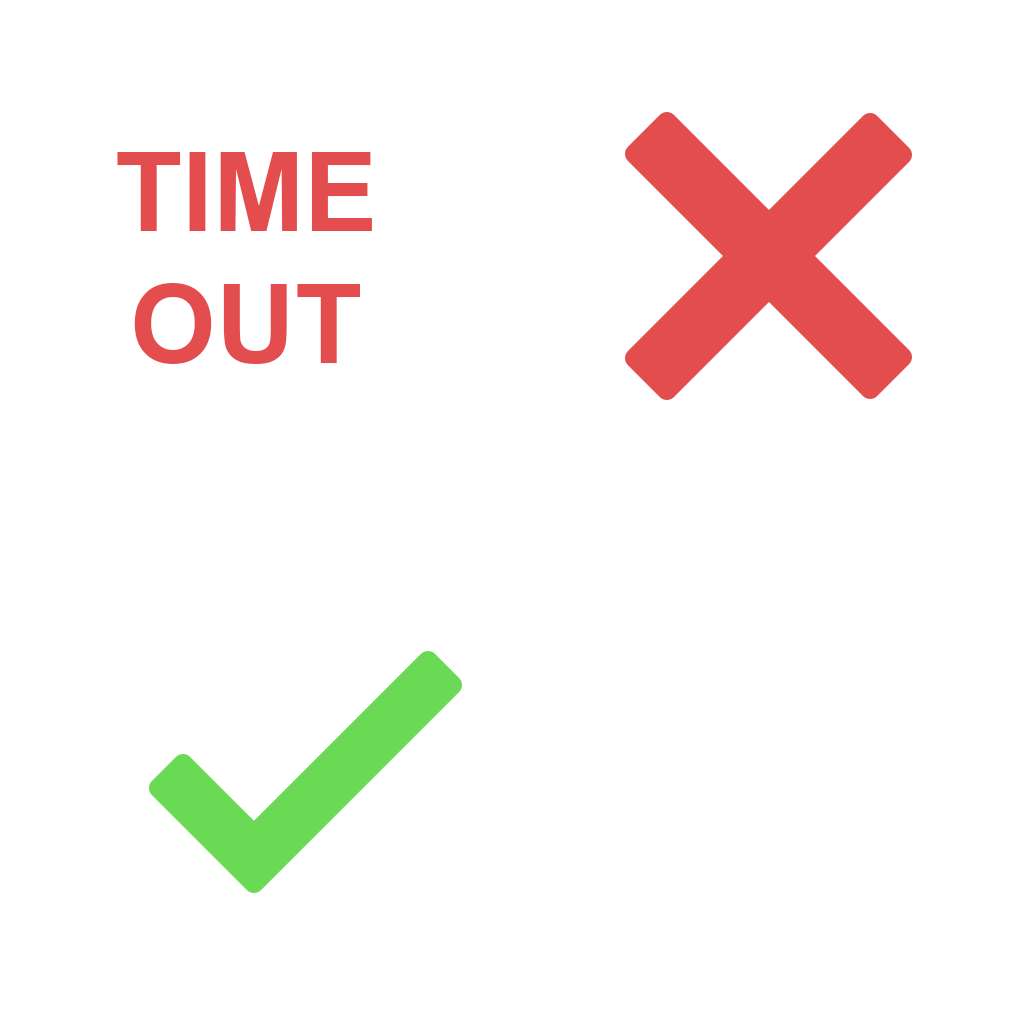
<style>
.page{position:relative;width:1024px;height:1024px;background:#ffffff}
.page>*{position:absolute;margin:0}
.t1{font:110px "Arial-BoldMT";color:#e34d4d}
</style>
<div class="page">
<p class="t1" style="left:117px;top:152px;width:255px;height:212px;text-align:center">TIME<br>OUT</p>
</div>
